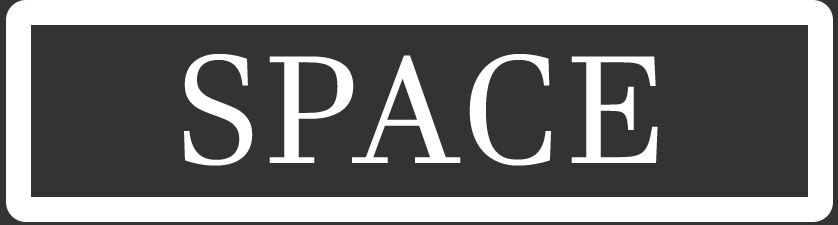
<style>
.page{position:relative;width:838px;height:225px;background:#333333}
.page>*{position:absolute;margin:0}
.t1{font:150px "JavaneseText";letter-spacing:0.035em;color:#ffffff}
</style>
<div class="page">
<p class="t1" style="left:184px;top:54px;width:474px;height:112px">SPACE</p>
</div>
